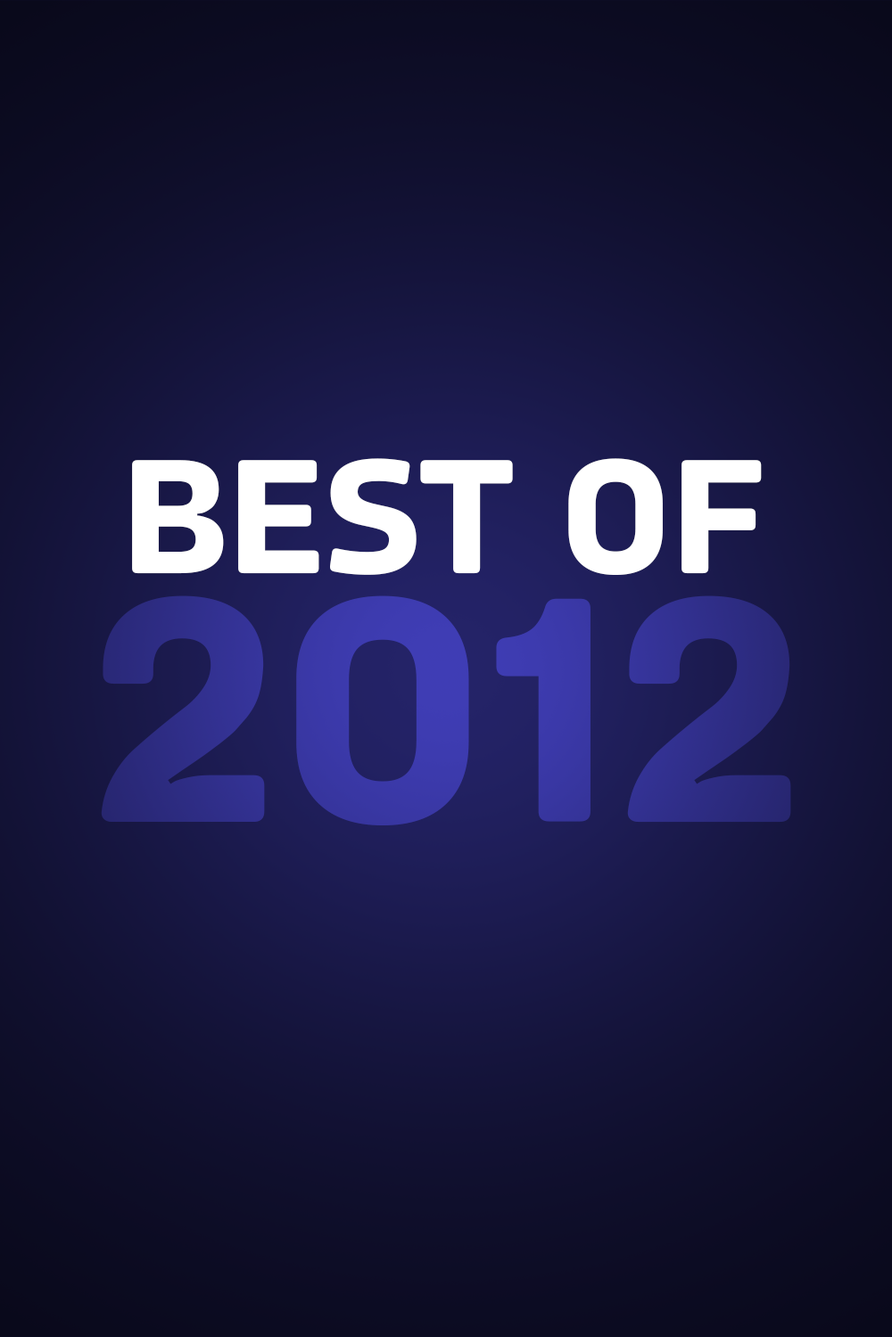
<style>
.page{position:relative;width:892px;height:1337px}
.page>*{position:absolute;margin:0}
.t1{font:161.8px "Amfibia-Bold";color:#ffffff;scale:1.03 1}
.t2{font:323.6px "Amfibia-Bold";scale:1.03 1}
</style>
<div class="page">
<p class="t1" style="left:132px;top:458px;width:629px;height:117px">BEST OF</p>
<p class="t2" style="left:101px;top:596px;width:690px;height:230px">2012</p>
</div>
